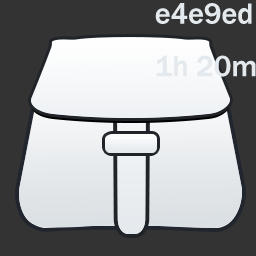
<style>
.page{position:relative;width:256px;height:256px;background:#333333}
.page>*{position:absolute;margin:0}
.t1{font:30px "FranklinGothic-Medium";color:#e4e9ed}
</style>
<div class="page">
<p class="t1" style="left:155px;top:3px;width:101px;height:74px">e4e9ed<br>1h 20m</p>
</div>
